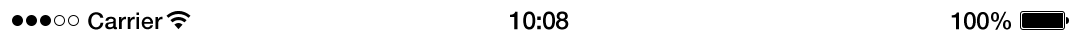
<style>
.page{position:relative;width:1080px;height:40px;background:#ffffff}
.page>*{position:absolute;margin:0}
.t1{font:23px "HelveticaNeue-Medium";letter-spacing:0.02em;color:#000000}
.t2{font:25px "HelveticaNeue-Medium";letter-spacing:-0.02em;color:#000000}
.t3{font:24px "HelveticaNeue-Medium";letter-spacing:-0.02em;color:#000000}
</style>
<div class="page">
<p class="t1" style="left:88px;top:12px;width:75px;height:18px">Carrier</p>
<p class="t2" style="left:510px;top:11px;width:59px;height:19px">10:08</p>
<p class="t3" style="left:951px;top:11px;width:60px;height:19px">100%</p>
</div>
